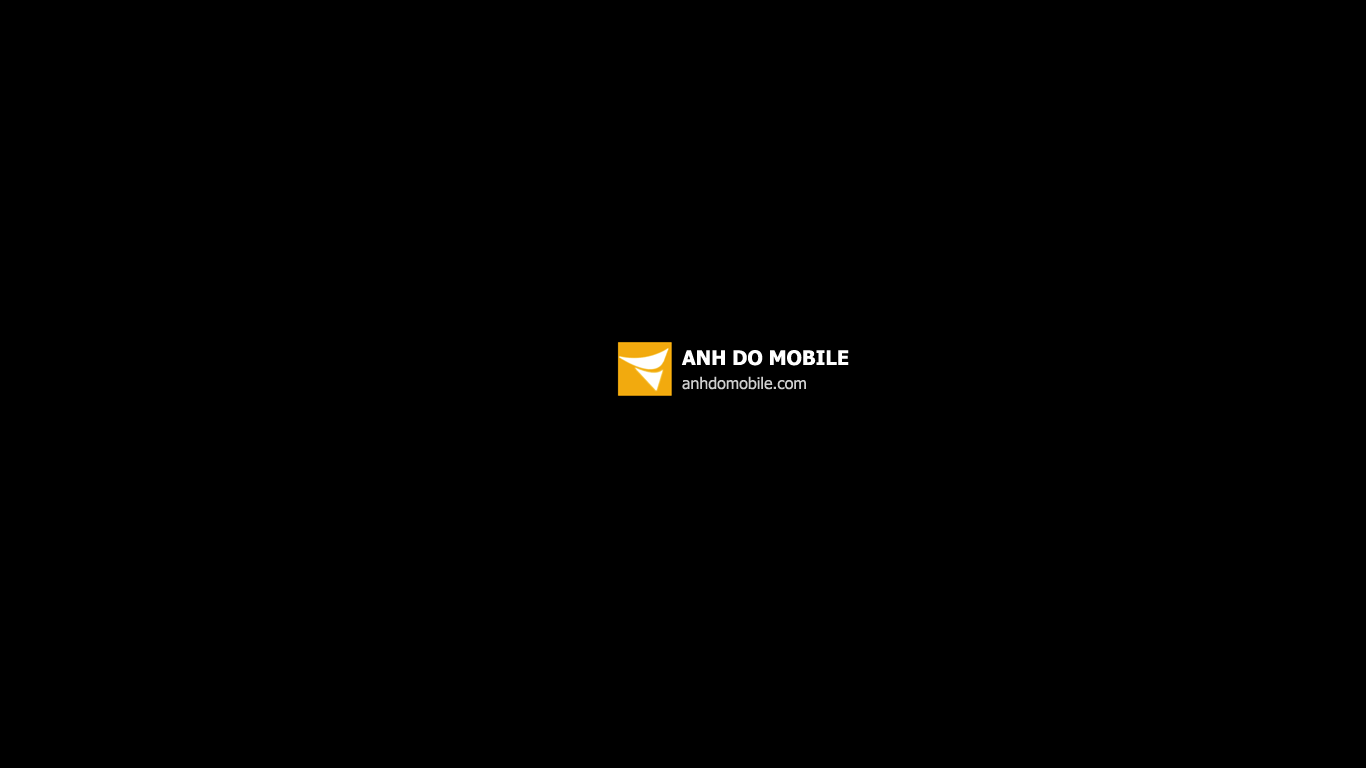
<style>
.page{position:relative;width:1366px;height:768px;background:#000000}
.page>*{position:absolute;margin:0}
.t1{font:20px "Tahoma-Bold";color:#ffffff}
.t2{font:16px "Tahoma";color:#cfcfcf}
</style>
<div class="page">
<p class="t1" style="left:681px;top:350px;width:168px;height:16px">ANH DO MOBILE</p>
<p class="t2" style="left:682px;top:376px;width:124px;height:14px">anhdomobile.com</p>
</div>
